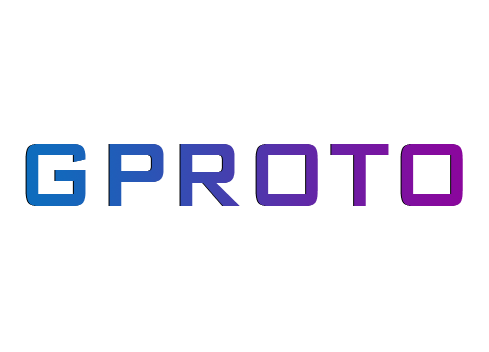
<style>
.page{position:relative;width:489px;height:352px;background:#ffffff}
.page>*{position:absolute;margin:0}
.t1{font:120px "BankGothicBT-Medium";font-variant:small-caps;scale:0.8 1}
</style>
<div class="page">
<p class="t1" style="left:25px;top:144px;width:437px;height:62px">GPROTO</p>
</div>
